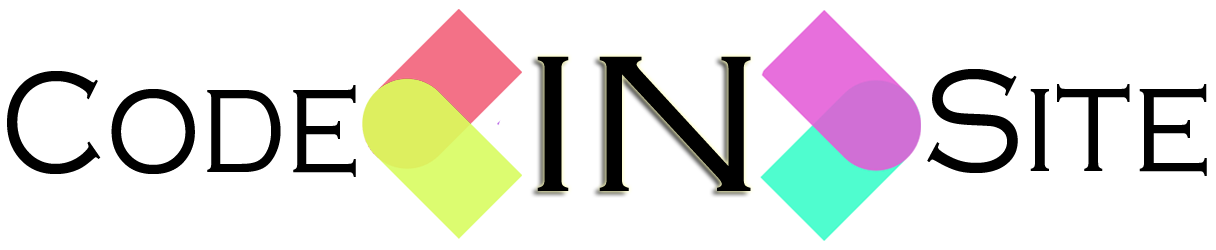
<style>
.page{position:relative;width:1216px;height:250px;background:#ffffff}
.page>*{position:absolute;margin:0}
.t1{font:200px "CopperplateGothic-Light";color:#000000;scale:1.09 1}
.t2{font:150px "CopperplateGothic-Light";color:#000000;scale:0.84 1}
.t3{font:150px "CopperplateGothic-Light";color:#000000;scale:0.9 1}
</style>
<div class="page">
<p class="t1" style="left:537px;top:56px;width:214px;height:135px">IN</p>
<p class="t2" style="left:7px;top:71px;width:349px;height:106px">Code</p>
<p class="t3" style="left:927px;top:69px;width:280px;height:107px">Site</p>
</div>
